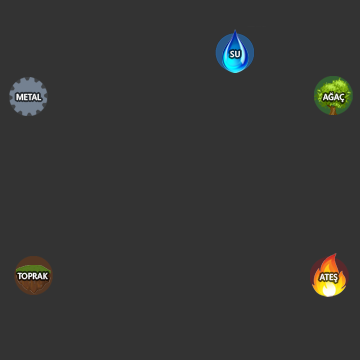
<style>
.page{position:relative;width:360px;height:360px;background:#333333}
.page>*{position:absolute;margin:0}
.t1{font:8.2px "SegoeUI-Semibold";color:#ffffff}
</style>
<div class="page">
<p class="t1" style="left:230px;top:50px;width:10px;height:8px">SU</p>
<p class="t1" style="left:16px;top:93px;width:26px;height:8px">METAL</p>
<p class="t1" style="left:323px;top:92px;width:22px;height:11px">AĞAÇ</p>
<p class="t1" style="left:17px;top:272px;width:31px;height:8px">TOPRAK</p>
<p class="t1" style="left:319px;top:273px;width:19px;height:10px">ATEŞ</p>
</div>
